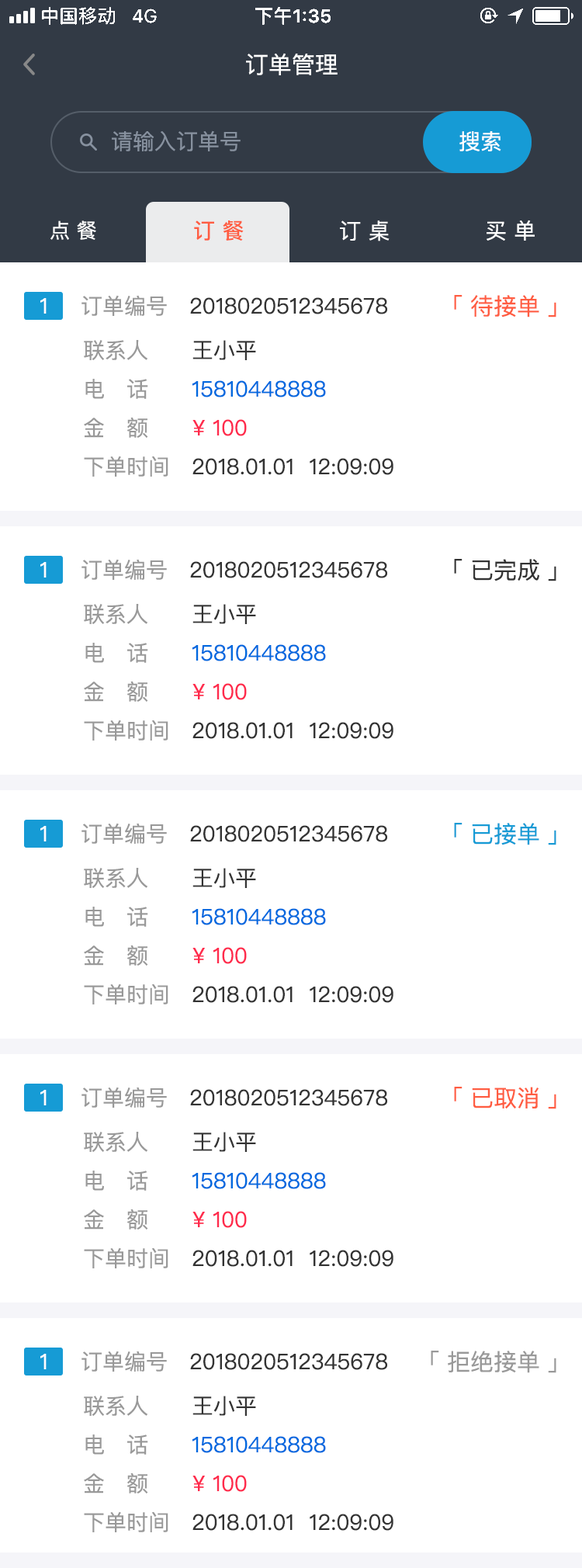
<style>
.page{position:relative;width:582px;height:1568px;background:#ffffff}
.page>*{position:absolute;margin:0}
.t1{font:23.3px "PingFangSC-Regular";color:#ffffff}
.t2{font:21.7px "PingFangSC-Regular";color:#87919f}
.t3{font:21.7px "PingFangSC-Regular";color:#ffffff}
.t4{font:20.2px "PingFangSC-Regular";color:#ffffff}
.t5{font:21.7px "PingFangSC-Medium";color:#ff5d42}
.t6{font:21.7px "PingFangSC-Regular";color:#333333}
.t7{font:21.7px "PingFangSC-Regular";color:#999999}
.t8{font:23.3px "PingFangSC-Regular";color:#ff5d42}
.t9{font:21.7px/38.8px "PingFangSC-Regular";color:#999999}
.t10{font:21.7px/38.8px "PingFangSC-Regular";color:#333333}
.t11{font:21.7px/38.8px "PingFangSC-Regular";color:#0069df}
.t12{font:21.7px/38.8px "PingFangSC-Regular";color:#ff2b4d}
.t13{font:23.3px "PingFangSC-Regular";color:#333333}
.t14{font:23.3px "PingFangSC-Regular";color:#169bd5}
.t15{font:23.3px "PingFangSC-Regular";color:#999999}
</style>
<div class="page">
<p class="t1" style="left:246px;top:53px;width:92px;height:22px">订单管理</p>
<p class="t2" style="left:112px;top:130px;width:129px;height:21px">请输入订单号</p>
<p class="t3" style="left:460px;top:131px;width:41px;height:20px">搜索</p>
<p class="t4" style="left:50px;top:220px;width:46px;height:20px">点 餐</p>
<p class="t5" style="left:194px;top:220px;width:50px;height:21px">订 餐</p>
<p class="t3" style="left:340px;top:220px;width:50px;height:21px">订 桌</p>
<p class="t3" style="left:487px;top:220px;width:48px;height:21px">买 单</p>
<p class="t3" style="left:40px;top:298px;width:7px;height:16px">1</p>
<p class="t6" style="left:82px;top:295px;width:305px;height:21px"><span class="t7">订单编号   </span>2018020512345678</p>
<p class="t8" style="left:454px;top:295px;width:103px;height:22px">「 待接单 」</p>
<p class="t6" style="left:84px;top:340px;width:310px;height:137px"><span class="t9">联系人      </span><span class="t10">王小平<br></span><span class="t7">电   话      </span><span class="t11">15810448888<br></span><span class="t9">金   额       </span><span class="t12">¥ 100<br></span><span class="t7">下单时间   </span>2018.01.01  12:09:09</p>
<p class="t3" style="left:40px;top:562px;width:7px;height:16px">1</p>
<p class="t6" style="left:82px;top:559px;width:305px;height:21px"><span class="t7">订单编号   </span>2018020512345678</p>
<p class="t13" style="left:454px;top:559px;width:103px;height:22px">「 已完成 」</p>
<p class="t6" style="left:84px;top:604px;width:310px;height:137px"><span class="t9">联系人      </span><span class="t10">王小平<br></span><span class="t7">电   话      </span><span class="t11">15810448888<br></span><span class="t9">金   额       </span><span class="t12">¥ 100<br></span><span class="t7">下单时间   </span>2018.01.01  12:09:09</p>
<p class="t3" style="left:40px;top:826px;width:7px;height:15px">1</p>
<p class="t6" style="left:82px;top:823px;width:305px;height:21px"><span class="t7">订单编号   </span>2018020512345678</p>
<p class="t14" style="left:454px;top:823px;width:103px;height:22px">「 已接单 」</p>
<p class="t6" style="left:84px;top:868px;width:310px;height:136px"><span class="t9">联系人      </span><span class="t10">王小平<br></span><span class="t7">电   话      </span><span class="t11">15810448888<br></span><span class="t9">金   额       </span><span class="t12">¥ 100<br></span><span class="t7">下单时间   </span>2018.01.01  12:09:09</p>
<p class="t3" style="left:40px;top:1090px;width:7px;height:15px">1</p>
<p class="t6" style="left:82px;top:1087px;width:305px;height:21px"><span class="t7">订单编号   </span>2018020512345678</p>
<p class="t8" style="left:454px;top:1087px;width:103px;height:22px">「 已取消 」</p>
<p class="t6" style="left:84px;top:1132px;width:310px;height:136px"><span class="t9">联系人      </span><span class="t10">王小平<br></span><span class="t7">电   话      </span><span class="t11">15810448888<br></span><span class="t9">金   额       </span><span class="t12">¥ 100<br></span><span class="t7">下单时间   </span>2018.01.01  12:09:09</p>
<p class="t3" style="left:40px;top:1354px;width:7px;height:15px">1</p>
<p class="t6" style="left:82px;top:1351px;width:305px;height:21px"><span class="t7">订单编号   </span>2018020512345678</p>
<p class="t15" style="left:431px;top:1351px;width:126px;height:22px">「 拒绝接单 」</p>
<p class="t6" style="left:84px;top:1396px;width:310px;height:136px"><span class="t9">联系人      </span><span class="t10">王小平<br></span><span class="t7">电   话      </span><span class="t11">15810448888<br></span><span class="t9">金   额       </span><span class="t12">¥ 100<br></span><span class="t7">下单时间   </span>2018.01.01  12:09:09</p>
</div>
